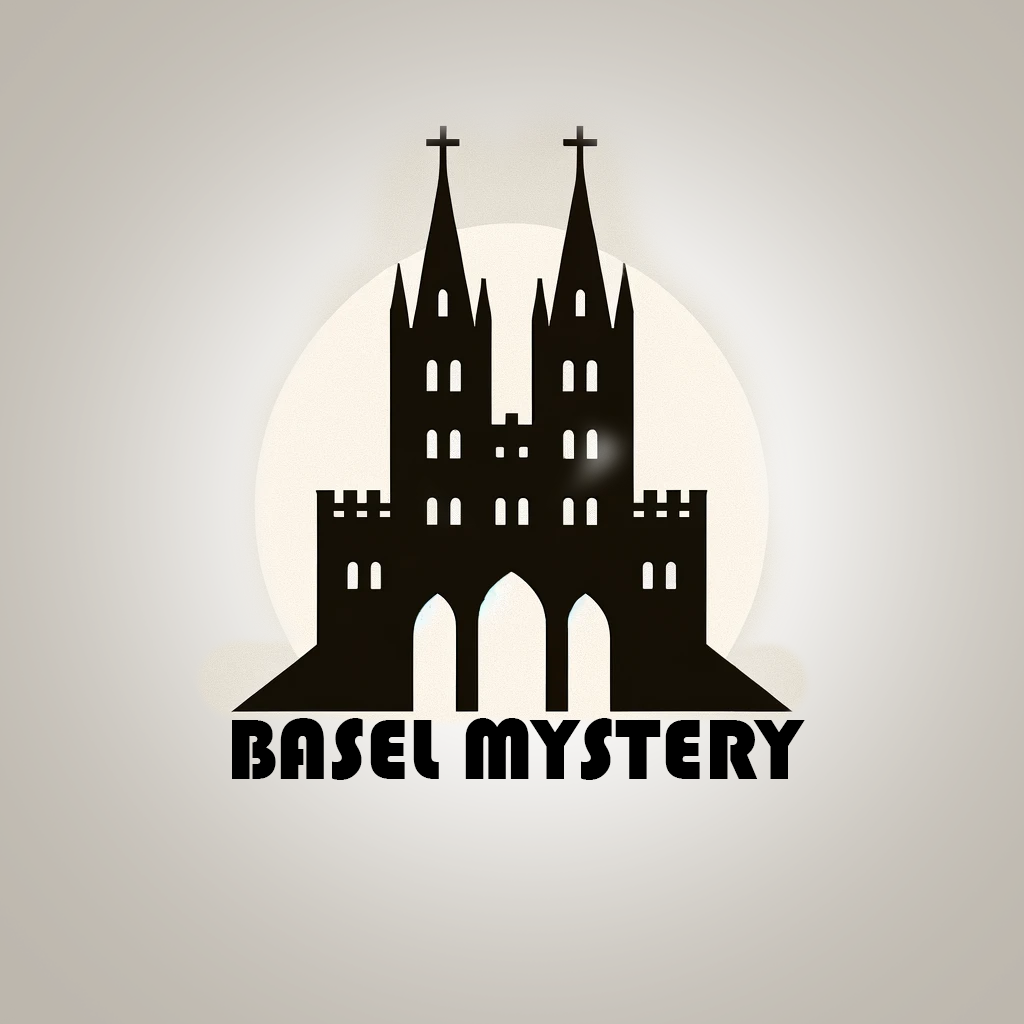
<style>
.page{position:relative;width:1024px;height:1024px}
.page>*{position:absolute;margin:0}
.t1{font:89.1px "Bauhaus93";color:#000000}
</style>
<div class="page">
<p class="t1" style="left:232px;top:718px;width:573px;height:62px">BASEL MYSTERY</p>
</div>
